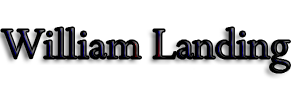
<style>
.page{position:relative;width:295px;height:100px;background:#ffffff}
.page>*{position:absolute;margin:0}
.t1{font:48px "Perpetua"}
</style>
<div class="page">
<p class="t1" style="left:2px;top:28px;width:288px;height:44px">William Landing</p>
</div>
